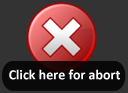
<style>
.page{position:relative;width:128px;height:93px;background:#333333}
.page>*{position:absolute;margin:0}
.t1{font:14px "Calibri-Bold";color:#ffffff}
</style>
<div class="page">
<p class="t1" style="left:9px;top:69px;width:111px;height:11px">Click here for abort</p>
</div>
